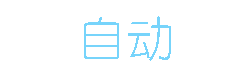
<style>
.page{position:relative;width:250px;height:75px;background:#ffffff}
.page>*{position:absolute;margin:0}
.t1{font:48px "YouYuan";color:#77d4fb}
</style>
<div class="page">
<p class="t1" style="left:84px;top:16px;width:87px;height:45px">自动</p>
</div>
